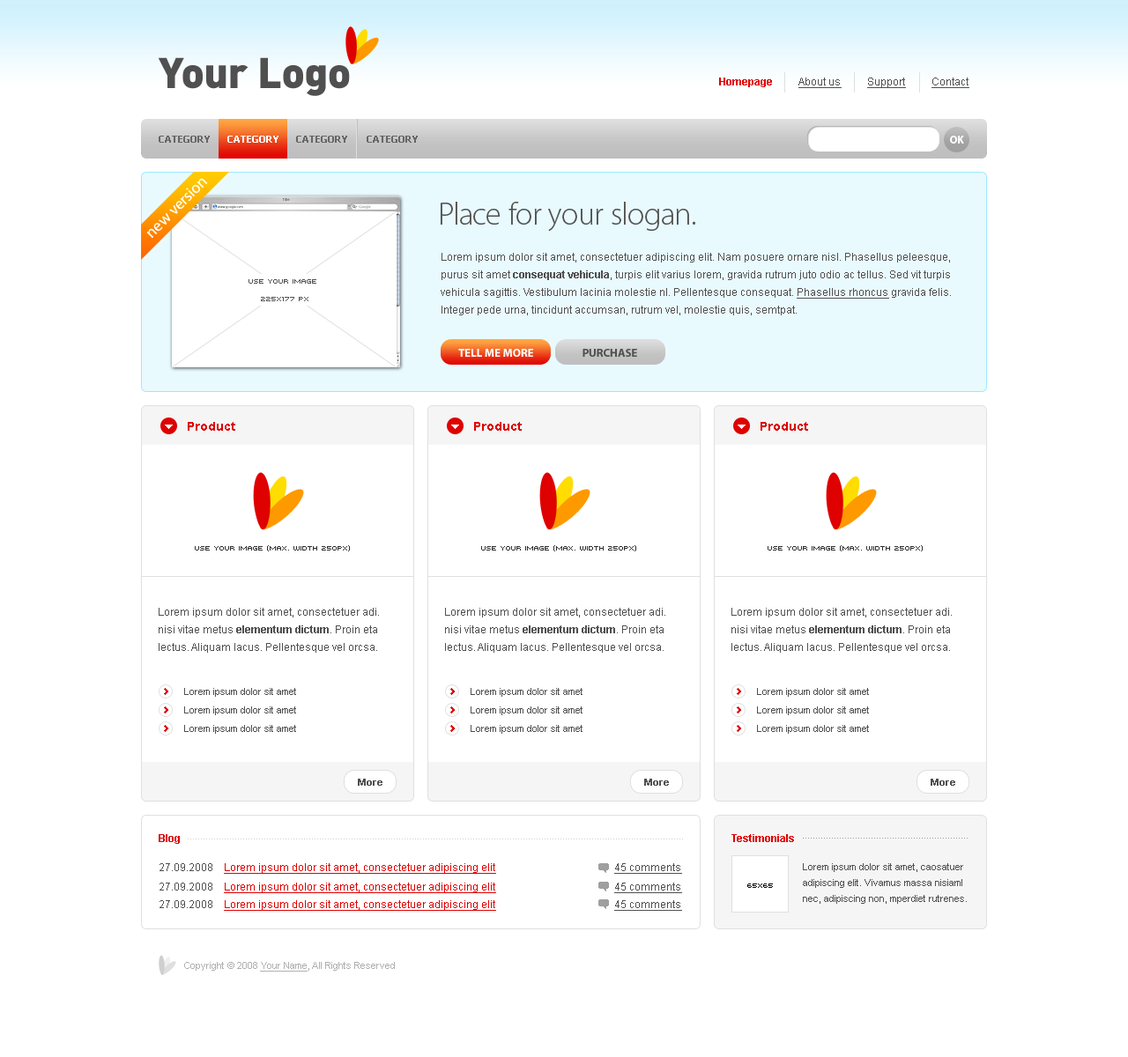
<style>
.page{position:relative;width:1128px;height:1057px;background:#ffffff}
.page>*{position:absolute;margin:0}
.t1{font:10.6px "ArialMT";color:#505050;text-decoration:underline}
.t2{font:10.6px "Arial-BoldMT";color:#df0000}
.t3{font:9.7px "Tahoma-Bold";color:#ffffff}
.t4{font:3.4px "MyriadPro-Regular"}
.t5{font:3.7px "MyriadPro-Regular"}
.t6{font:31.7px "MyriadPro-Light";color:#505050}
.t7{font:10.6px/17.6px "ArialMT";color:#505050}
.t8{font:10.6px/17.6px "Arial-BoldMT";color:#505050}
.t9{font:10.6px/17.6px "ArialMT";color:#505050;text-decoration:underline}
.t10{font:11.5px "MyriadPro-Bold";color:#ffffff}
.t11{font:11.5px "MyriadPro-Bold";color:#505050}
.t12{font:12.3px "Arial-BoldMT";color:#df0000}
.t13{font:10.6px "ArialMT";color:#df0000;text-decoration:underline}
.t14{font:10.6px "ArialMT";color:#505050}
.t15{font:9.7px/15.9px "ArialMT";color:#505050}
.t16{font:9.7px "ArialMT";color:#afafaf}
.t17{font:9.7px "ArialMT";color:#afafaf;text-decoration:underline}
</style>
<div class="page">
<p class="t1" style="left:719px;top:78px;width:250px;height:10px"><span class="t2">Homepage          </span>About us          Support          Contact</p>
<p class="t3" style="left:227px;top:136px;width:51px;height:7px">CATEGORY</p>
<p class="t4" style="left:218px;top:205px;width:25px;height:4px">www.google.com</p>
<p class="t5" style="left:283px;top:198px;width:7px;height:3px">Title</p>
<p class="t6" style="left:441px;top:202px;width:254px;height:30px">Place for your slogan.</p>
<p class="t7" style="left:441px;top:253px;width:510px;height:62px">Lorem ipsum dolor sit amet, consectetuer adipiscing elit. Nam posuere ornare nisl. Phasellus peleesque, <br>purus sit amet <span class="t8">consequat vehicula</span>, turpis elit varius lorem, gravida rutrum juto odio ac tellus. Sed vit turpis <br>vehicula sagittis. Vestibulum lacinia molestie nl. Pellentesque consequat. <span class="t9">Phasellus rhoncus</span> gravida felis. <br>Integer pede urna, tincidunt accumsan, rutrum vel, molestie quis, semtpat.</p>
<p class="t10" style="left:458px;top:349px;width:75px;height:8px">TELL ME MORE</p>
<p class="t11" style="left:582px;top:349px;width:55px;height:8px">PURCHASE</p>
<p class="t12" style="left:188px;top:422px;width:47px;height:9px">Product</p>
<p class="t12" style="left:474px;top:422px;width:48px;height:9px">Product</p>
<p class="t12" style="left:760px;top:422px;width:48px;height:9px">Product</p>
<p class="t2" style="left:159px;top:834px;width:21px;height:10px">Blog</p>
<p class="t2" style="left:731px;top:834px;width:63px;height:8px">Testimonials</p>
<p class="t13" style="left:159px;top:863px;width:523px;height:11px"><span class="t14">27.09.2008    </span>Lorem ipsum dolor sit amet, consectetuer adipiscing elit                                             <span class="t1">45 comments</span></p>
<p class="t15" style="left:803px;top:863px;width:164px;height:41px">Lorem ipsum dolor sit amet, caosatuer <br>adipiscing elit. Vivamus massa nisiaml <br>nec, adipiscing non, mperdiet rutrenes.</p>
<p class="t13" style="left:159px;top:883px;width:523px;height:10px"><span class="t14">27.09.2008    </span>Lorem ipsum dolor sit amet, consectetuer adipiscing elit                                             <span class="t1">45 comments</span></p>
<p class="t13" style="left:159px;top:900px;width:523px;height:11px"><span class="t14">27.09.2008    </span>Lorem ipsum dolor sit amet, consectetuer adipiscing elit                                             <span class="t1">45 comments</span></p>
<p class="t16" style="left:184px;top:962px;width:211px;height:10px">Copyright © 2008 <span class="t17">Your Name</span>, All Rights Reserved</p>
</div>
